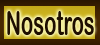
<style>
.page{position:relative;width:100px;height:45px}
.page>*{position:absolute;margin:0}
.t1{font:34px "ArialRoundedMTBold";color:#1e0e00;scale:0.59 1}
</style>
<div class="page">
<p class="t1" style="left:7px;top:11px;width:87px;height:24px">Nosotros</p>
</div>
